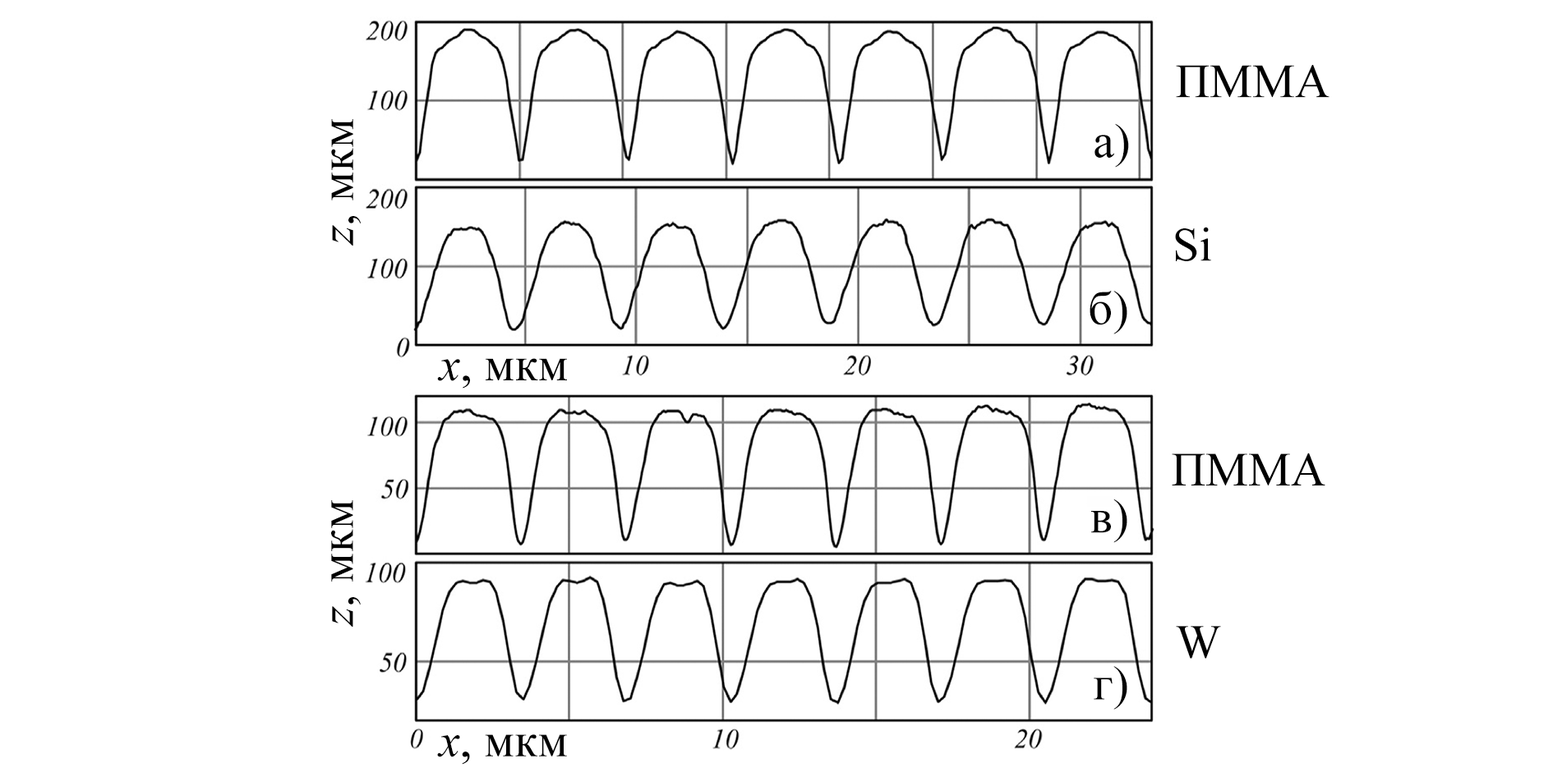
<style>
.page{position:relative;width:1553px;height:768px;background:#ffffff}
.page>*{position:absolute;margin:0}
.t1{font:47.9px "TimesNewRomanPSMT";color:#000000}
.t2{font:47.9px "TimesNewRomanPS-ItalicMT";color:#000000}
</style>
<div class="page">
<p class="t1" style="left:1175px;top:65px;width:154px;height:33px">ПММА</p>
<p class="t1" style="left:331px;top:119px;width:30px;height:127px;rotate:-90deg"><span class="t2">z</span>, мкм</p>
<p class="t1" style="left:1094px;top:123px;width:35px;height:45px">а)</p>
<p class="t1" style="left:1175px;top:227px;width:36px;height:34px">Si</p>
<p class="t1" style="left:1089px;top:291px;width:38px;height:43px">б)</p>
<p class="t1" style="left:437px;top:358px;width:130px;height:31px"><span class="t2">x</span>, мкм</p>
<p class="t1" style="left:1171px;top:453px;width:154px;height:32px">ПММА</p>
<p class="t1" style="left:331px;top:500px;width:30px;height:127px;rotate:-90deg"><span class="t2">z</span>, мкм</p>
<p class="t1" style="left:1091px;top:499px;width:36px;height:44px">в)</p>
<p class="t1" style="left:1175px;top:626px;width:46px;height:33px">W</p>
<p class="t1" style="left:1093px;top:666px;width:34px;height:44px">г)</p>
<p class="t1" style="left:437px;top:734px;width:130px;height:31px"><span class="t2">x</span>, мкм</p>
</div>
